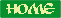
<style>
.page{position:relative;width:61px;height:18px;background:#08902e}
.page>*{position:absolute;margin:0}
.t1{font:16.9px "SevenSwordsmenBB";color:#eeefa3}
</style>
<div class="page">
<p class="t1" style="left:6px;top:3px;width:49px;height:11px">HOMe</p>
</div>
